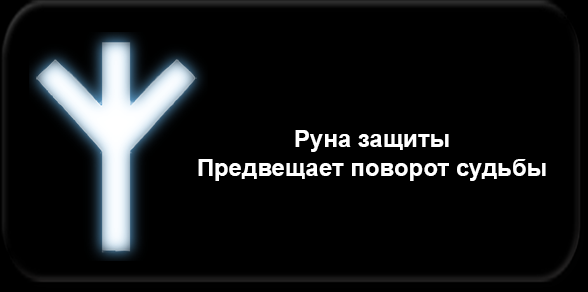
<style>
.page{position:relative;width:588px;height:292px;background:#000000}
.page>*{position:absolute;margin:0}
.t1{font:24px "Arial-BoldMT";color:#ffffff}
</style>
<div class="page">
<p class="t1" style="left:198px;top:130px;width:348px;height:51px;text-align:center">Руна защиты<br>Предвещает поворот судьбы</p>
</div>
